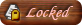
<style>
.page{position:relative;width:82px;height:25px}
.page>*{position:absolute;margin:0}
.t1{font:16px "MonotypeCorsiva";letter-spacing:0.025em;color:#ffbdbd;font-style:italic}
</style>
<div class="page">
<p class="t1" style="left:25px;top:6px;width:49px;height:14px">Locked</p>
</div>
